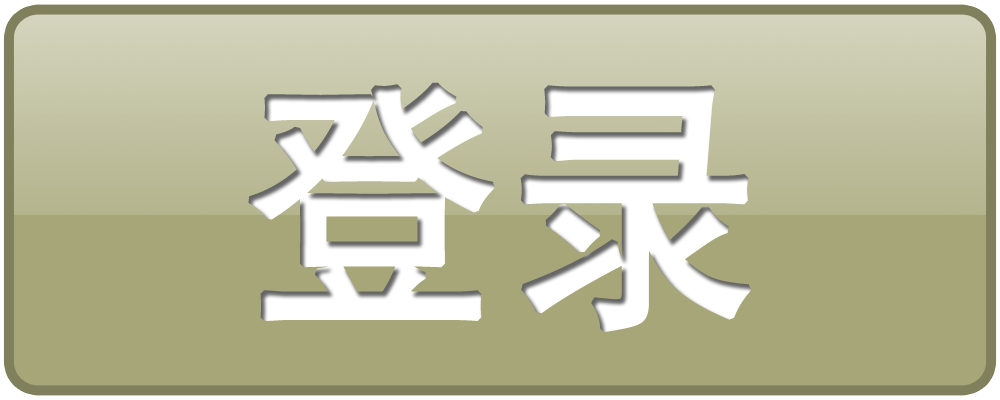
<style>
.page{position:relative;width:1000px;height:400px;background:#a6a678}
.page>*{position:absolute;margin:0}
.t1{font:258.7px "SIL-Hei-Med-Jian";color:#ffffff;font-weight:bold}
</style>
<div class="page">
<p class="t1" style="left:248px;top:82px;width:503px;height:250px">登录</p>
</div>
